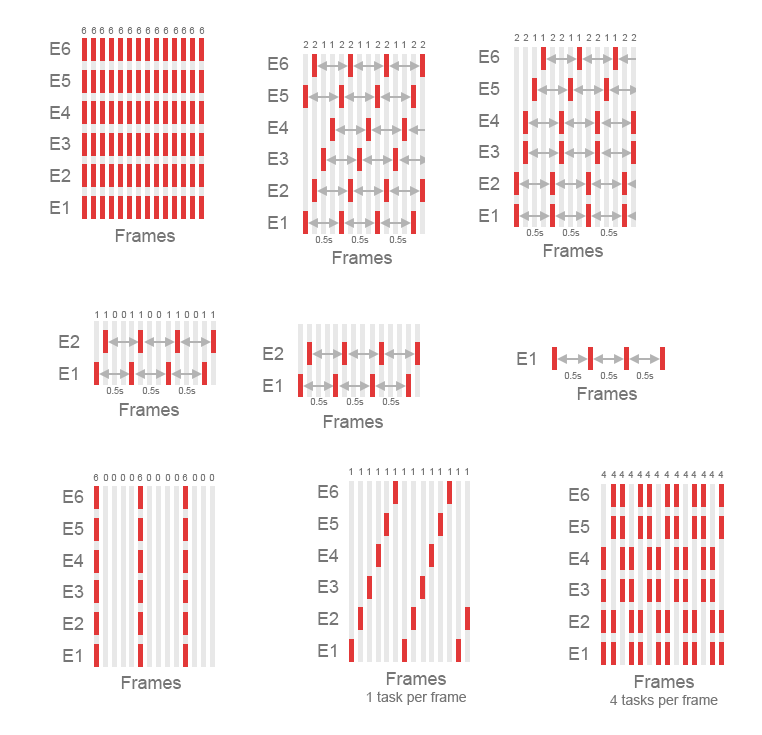
<style>
.page{position:relative;width:762px;height:735px;background:#ffffff}
.page>*{position:absolute;margin:0}
.t1{font:9px "ArialMT";color:#767676}
.t2{font:18px "ArialMT";color:#767676}
.t3{font:14px "ArialMT";color:#767676}
</style>
<div class="page">
<p class="t1" style="left:81px;top:27px;width:6px;height:7px">6</p>
<p class="t1" style="left:91px;top:27px;width:6px;height:7px">6</p>
<p class="t1" style="left:99px;top:27px;width:6px;height:7px">6</p>
<p class="t1" style="left:108px;top:27px;width:6px;height:7px">6</p>
<p class="t1" style="left:118px;top:27px;width:6px;height:7px">6</p>
<p class="t1" style="left:127px;top:27px;width:6px;height:7px">6</p>
<p class="t1" style="left:136px;top:27px;width:6px;height:7px">6</p>
<p class="t1" style="left:145px;top:27px;width:6px;height:7px">6</p>
<p class="t1" style="left:154px;top:27px;width:6px;height:7px">6</p>
<p class="t1" style="left:163px;top:27px;width:6px;height:7px">6</p>
<p class="t1" style="left:173px;top:27px;width:6px;height:7px">6</p>
<p class="t1" style="left:181px;top:27px;width:6px;height:7px">6</p>
<p class="t1" style="left:189px;top:27px;width:6px;height:7px">6</p>
<p class="t1" style="left:199px;top:27px;width:6px;height:7px">6</p>
<p class="t1" style="left:303px;top:41px;width:6px;height:7px">2</p>
<p class="t1" style="left:312px;top:41px;width:6px;height:7px">2</p>
<p class="t1" style="left:322px;top:41px;width:3px;height:7px">1</p>
<p class="t1" style="left:330px;top:41px;width:3px;height:7px">1</p>
<p class="t1" style="left:339px;top:41px;width:6px;height:7px">2</p>
<p class="t1" style="left:348px;top:41px;width:6px;height:7px">2</p>
<p class="t1" style="left:358px;top:41px;width:3px;height:7px">1</p>
<p class="t1" style="left:366px;top:41px;width:3px;height:7px">1</p>
<p class="t1" style="left:375px;top:41px;width:6px;height:7px">2</p>
<p class="t1" style="left:384px;top:41px;width:6px;height:7px">2</p>
<p class="t1" style="left:394px;top:41px;width:3px;height:7px">1</p>
<p class="t1" style="left:402px;top:41px;width:3px;height:7px">1</p>
<p class="t1" style="left:411px;top:41px;width:6px;height:7px">2</p>
<p class="t1" style="left:420px;top:41px;width:6px;height:7px">2</p>
<p class="t1" style="left:514px;top:34px;width:6px;height:7px">2</p>
<p class="t1" style="left:523px;top:34px;width:6px;height:7px">2</p>
<p class="t1" style="left:533px;top:34px;width:3px;height:7px">1</p>
<p class="t1" style="left:541px;top:34px;width:3px;height:7px">1</p>
<p class="t1" style="left:550px;top:34px;width:6px;height:7px">2</p>
<p class="t1" style="left:559px;top:34px;width:6px;height:7px">2</p>
<p class="t1" style="left:569px;top:34px;width:3px;height:7px">1</p>
<p class="t1" style="left:577px;top:34px;width:3px;height:7px">1</p>
<p class="t1" style="left:586px;top:34px;width:6px;height:7px">2</p>
<p class="t1" style="left:595px;top:34px;width:6px;height:7px">2</p>
<p class="t1" style="left:605px;top:34px;width:3px;height:7px">1</p>
<p class="t1" style="left:613px;top:34px;width:3px;height:7px">1</p>
<p class="t1" style="left:622px;top:34px;width:6px;height:7px">2</p>
<p class="t1" style="left:631px;top:34px;width:6px;height:7px">2</p>
<p class="t2" style="left:50px;top:42px;width:21px;height:13px">E6</p>
<p class="t2" style="left:479px;top:50px;width:21px;height:13px">E6</p>
<p class="t2" style="left:268px;top:57px;width:21px;height:13px">E6</p>
<p class="t2" style="left:50px;top:74px;width:21px;height:13px">E5</p>
<p class="t2" style="left:268px;top:89px;width:21px;height:13px">E5</p>
<p class="t2" style="left:479px;top:82px;width:21px;height:13px">E5</p>
<p class="t2" style="left:50px;top:106px;width:21px;height:13px">E4</p>
<p class="t2" style="left:268px;top:121px;width:21px;height:13px">E4</p>
<p class="t2" style="left:479px;top:114px;width:21px;height:13px">E4</p>
<p class="t2" style="left:50px;top:137px;width:21px;height:13px">E3</p>
<p class="t2" style="left:479px;top:145px;width:21px;height:13px">E3</p>
<p class="t2" style="left:268px;top:152px;width:21px;height:13px">E3</p>
<p class="t2" style="left:50px;top:169px;width:21px;height:13px">E2</p>
<p class="t2" style="left:268px;top:184px;width:21px;height:13px">E2</p>
<p class="t2" style="left:479px;top:177px;width:21px;height:13px">E2</p>
<p class="t2" style="left:50px;top:201px;width:18px;height:13px">E1</p>
<p class="t2" style="left:479px;top:209px;width:18px;height:13px">E1</p>
<p class="t2" style="left:268px;top:216px;width:18px;height:13px">E1</p>
<p class="t2" style="left:115px;top:229px;width:60px;height:13px">Frames</p>
<p class="t1" style="left:526px;top:229px;width:18px;height:7px">0.5s</p>
<p class="t1" style="left:562px;top:229px;width:18px;height:7px">0.5s</p>
<p class="t1" style="left:600px;top:229px;width:18px;height:7px">0.5s</p>
<p class="t1" style="left:315px;top:236px;width:18px;height:7px">0.5s</p>
<p class="t1" style="left:351px;top:236px;width:18px;height:7px">0.5s</p>
<p class="t1" style="left:389px;top:236px;width:18px;height:7px">0.5s</p>
<p class="t2" style="left:543px;top:244px;width:60px;height:13px">Frames</p>
<p class="t2" style="left:332px;top:251px;width:60px;height:13px">Frames</p>
<p class="t1" style="left:95px;top:311px;width:3px;height:7px">1</p>
<p class="t1" style="left:104px;top:311px;width:3px;height:7px">1</p>
<p class="t1" style="left:112px;top:311px;width:6px;height:7px">0</p>
<p class="t1" style="left:121px;top:311px;width:6px;height:7px">0</p>
<p class="t1" style="left:130px;top:311px;width:3px;height:7px">1</p>
<p class="t1" style="left:139px;top:311px;width:3px;height:7px">1</p>
<p class="t1" style="left:147px;top:311px;width:6px;height:7px">0</p>
<p class="t1" style="left:156px;top:311px;width:6px;height:7px">0</p>
<p class="t1" style="left:167px;top:311px;width:3px;height:7px">1</p>
<p class="t1" style="left:176px;top:311px;width:3px;height:7px">1</p>
<p class="t1" style="left:184px;top:311px;width:6px;height:7px">0</p>
<p class="t1" style="left:193px;top:311px;width:6px;height:7px">0</p>
<p class="t1" style="left:202px;top:311px;width:3px;height:7px">1</p>
<p class="t1" style="left:211px;top:311px;width:3px;height:7px">1</p>
<p class="t2" style="left:59px;top:335px;width:21px;height:13px">E2</p>
<p class="t2" style="left:263px;top:347px;width:21px;height:13px">E2</p>
<p class="t2" style="left:517px;top:352px;width:18px;height:13px">E1</p>
<p class="t2" style="left:59px;top:367px;width:18px;height:13px">E1</p>
<p class="t1" style="left:564px;top:372px;width:18px;height:7px">0.5s</p>
<p class="t1" style="left:600px;top:372px;width:18px;height:7px">0.5s</p>
<p class="t1" style="left:636px;top:372px;width:18px;height:7px">0.5s</p>
<p class="t1" style="left:106px;top:387px;width:18px;height:7px">0.5s</p>
<p class="t1" style="left:142px;top:387px;width:18px;height:7px">0.5s</p>
<p class="t1" style="left:178px;top:387px;width:18px;height:7px">0.5s</p>
<p class="t2" style="left:263px;top:379px;width:18px;height:13px">E1</p>
<p class="t2" style="left:577px;top:387px;width:60px;height:13px">Frames</p>
<p class="t1" style="left:310px;top:398px;width:18px;height:7px">0.5s</p>
<p class="t1" style="left:346px;top:398px;width:18px;height:7px">0.5s</p>
<p class="t1" style="left:382px;top:398px;width:18px;height:7px">0.5s</p>
<p class="t2" style="left:119px;top:403px;width:60px;height:13px">Frames</p>
<p class="t2" style="left:323px;top:415px;width:60px;height:13px">Frames</p>
<p class="t1" style="left:349px;top:468px;width:3px;height:7px">1</p>
<p class="t1" style="left:359px;top:468px;width:3px;height:7px">1</p>
<p class="t1" style="left:367px;top:468px;width:3px;height:7px">1</p>
<p class="t1" style="left:376px;top:468px;width:3px;height:7px">1</p>
<p class="t1" style="left:385px;top:468px;width:3px;height:7px">1</p>
<p class="t1" style="left:393px;top:468px;width:3px;height:7px">1</p>
<p class="t1" style="left:402px;top:468px;width:3px;height:7px">1</p>
<p class="t1" style="left:411px;top:468px;width:3px;height:7px">1</p>
<p class="t1" style="left:421px;top:468px;width:3px;height:7px">1</p>
<p class="t1" style="left:430px;top:468px;width:3px;height:7px">1</p>
<p class="t1" style="left:438px;top:468px;width:3px;height:7px">1</p>
<p class="t1" style="left:448px;top:468px;width:3px;height:7px">1</p>
<p class="t1" style="left:456px;top:468px;width:3px;height:7px">1</p>
<p class="t1" style="left:465px;top:468px;width:3px;height:7px">1</p>
<p class="t1" style="left:601px;top:471px;width:6px;height:7px">4</p>
<p class="t1" style="left:611px;top:471px;width:6px;height:7px">4</p>
<p class="t1" style="left:619px;top:471px;width:6px;height:7px">4</p>
<p class="t1" style="left:628px;top:471px;width:6px;height:7px">4</p>
<p class="t1" style="left:637px;top:471px;width:6px;height:7px">4</p>
<p class="t1" style="left:645px;top:471px;width:6px;height:7px">4</p>
<p class="t1" style="left:654px;top:471px;width:6px;height:7px">4</p>
<p class="t1" style="left:664px;top:471px;width:6px;height:7px">4</p>
<p class="t1" style="left:674px;top:471px;width:6px;height:7px">4</p>
<p class="t1" style="left:683px;top:471px;width:6px;height:7px">4</p>
<p class="t1" style="left:691px;top:471px;width:6px;height:7px">4</p>
<p class="t1" style="left:701px;top:471px;width:6px;height:7px">4</p>
<p class="t1" style="left:709px;top:471px;width:6px;height:7px">4</p>
<p class="t1" style="left:718px;top:471px;width:6px;height:7px">4</p>
<p class="t1" style="left:93px;top:474px;width:6px;height:7px">6</p>
<p class="t1" style="left:103px;top:474px;width:6px;height:7px">0</p>
<p class="t1" style="left:111px;top:474px;width:6px;height:7px">0</p>
<p class="t1" style="left:120px;top:474px;width:6px;height:7px">0</p>
<p class="t1" style="left:129px;top:474px;width:6px;height:7px">0</p>
<p class="t1" style="left:137px;top:474px;width:6px;height:7px">6</p>
<p class="t1" style="left:146px;top:474px;width:6px;height:7px">0</p>
<p class="t1" style="left:155px;top:474px;width:6px;height:7px">0</p>
<p class="t1" style="left:165px;top:474px;width:6px;height:7px">0</p>
<p class="t1" style="left:174px;top:474px;width:6px;height:7px">0</p>
<p class="t1" style="left:182px;top:474px;width:6px;height:7px">6</p>
<p class="t1" style="left:192px;top:474px;width:6px;height:7px">0</p>
<p class="t1" style="left:200px;top:474px;width:6px;height:7px">0</p>
<p class="t1" style="left:209px;top:474px;width:6px;height:7px">0</p>
<p class="t2" style="left:318px;top:485px;width:21px;height:13px">E6</p>
<p class="t2" style="left:63px;top:490px;width:21px;height:13px">E6</p>
<p class="t2" style="left:569px;top:488px;width:21px;height:13px">E6</p>
<p class="t2" style="left:318px;top:517px;width:21px;height:13px">E5</p>
<p class="t2" style="left:569px;top:520px;width:21px;height:13px">E5</p>
<p class="t2" style="left:63px;top:522px;width:21px;height:13px">E5</p>
<p class="t2" style="left:63px;top:554px;width:21px;height:13px">E4</p>
<p class="t2" style="left:318px;top:549px;width:21px;height:13px">E4</p>
<p class="t2" style="left:569px;top:552px;width:21px;height:13px">E4</p>
<p class="t2" style="left:318px;top:580px;width:21px;height:13px">E3</p>
<p class="t2" style="left:63px;top:585px;width:21px;height:13px">E3</p>
<p class="t2" style="left:569px;top:583px;width:21px;height:13px">E3</p>
<p class="t2" style="left:63px;top:617px;width:21px;height:13px">E2</p>
<p class="t2" style="left:318px;top:612px;width:21px;height:13px">E2</p>
<p class="t2" style="left:569px;top:615px;width:21px;height:13px">E2</p>
<p class="t2" style="left:63px;top:649px;width:18px;height:13px">E1</p>
<p class="t2" style="left:318px;top:644px;width:18px;height:13px">E1</p>
<p class="t2" style="left:569px;top:647px;width:18px;height:13px">E1</p>
<p class="t2" style="left:121px;top:676px;width:60px;height:13px">Frames</p>
<p class="t3" style="left:366px;top:672px;width:100px;height:33px;text-align:center"><span class="t2">Frames<br></span>1 task per frame</p>
<p class="t3" style="left:610px;top:675px;width:108px;height:33px;text-align:center"><span class="t2">Frames<br></span>4 tasks per frame</p>
</div>
